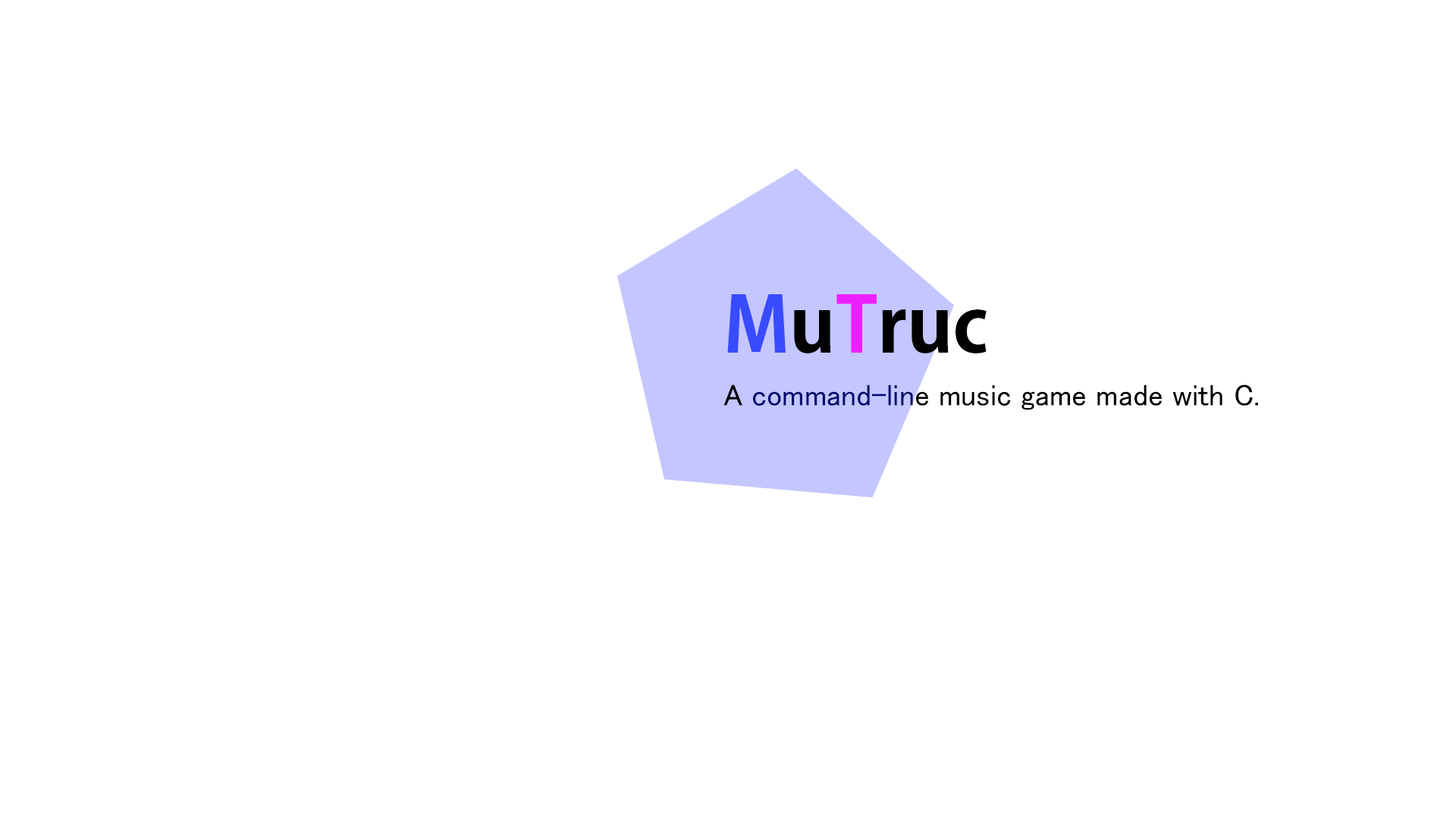
<style>
.page{position:relative;width:1456px;height:819px;background:#ffffff}
.page>*{position:absolute;margin:0}
.t1{font:75.8px "KozGoPr6N-Bold";color:#000000}
.t2{font:75.8px "KozGoPr6N-Bold";color:#384bff}
.t3{font:75.8px "KozGoPr6N-Bold";color:#ec1fff}
.t4{font:30.3px "MS-PGothic";color:#000000}
.t5{font:30.3px "MS-PGothic";color:#000d6f}
</style>
<div class="page">
<p class="t1" style="left:727px;top:294px;width:260px;height:59px"><span class="t2">M</span>u<span class="t3">T</span>ruc</p>
<p class="t4" style="left:723px;top:384px;width:535px;height:26px">A <span class="t5">command-line</span> music game made with C.</p>
<p class="t4" style="left:723px;top:384px;width:535px;height:26px">A <span class="t5">command-l</span>ine music game made with C.</p>
</div>
